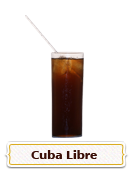
<style>
.page{position:relative;width:132px;height:195px;background:#ffffff}
.page>*{position:absolute;margin:0}
.t1{font:11.4px "Humanist777BT-BlackB";color:#3a0f07;scale:1.05 1}
</style>
<div class="page">
<p class="t1" style="left:31px;top:150px;width:66px;height:9px">Cuba Libre</p>
</div>
